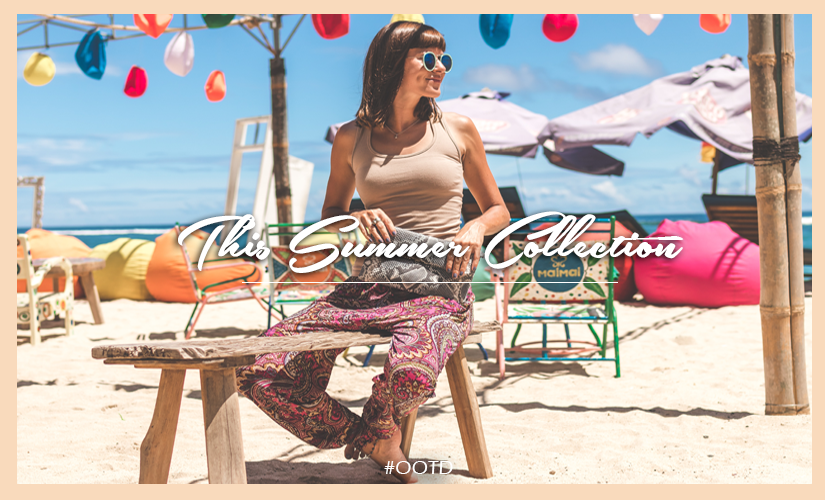
<style>
.page{position:relative;width:825px;height:500px}
.page>*{position:absolute;margin:0}
.t1{font:76.1px "SouthernAirePersonalUseOnly";color:#ffffff}
.t2{font:20.3px "ErasITC-Medium";color:#ffffff}
</style>
<div class="page">
<p class="t1" style="left:178px;top:211px;width:506px;height:62px">This Summer Collection</p>
<p class="t2" style="left:384px;top:461px;width:69px;height:13px">#OOTD</p>
</div>
